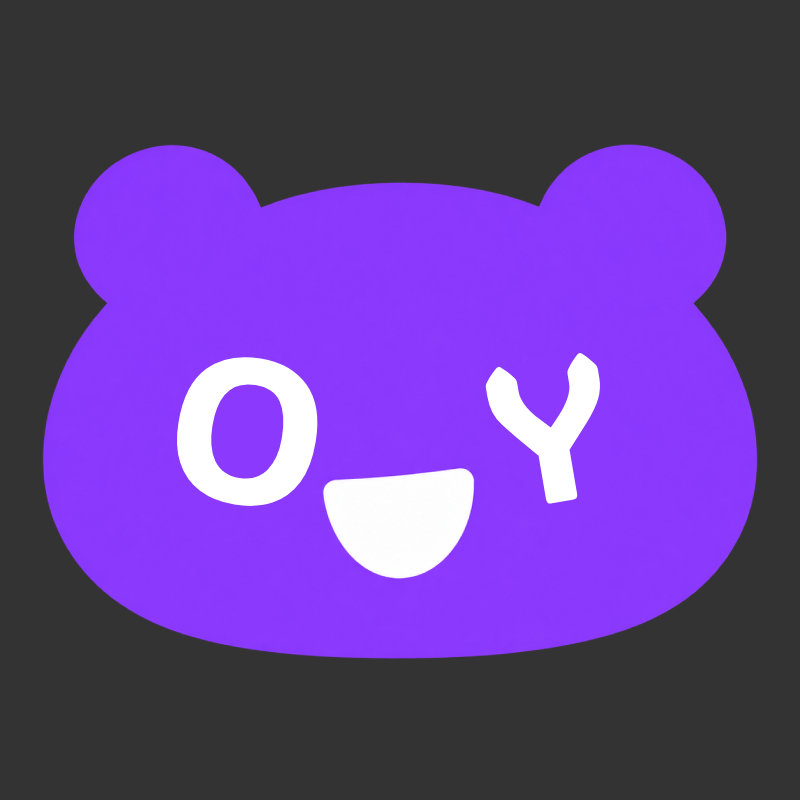
<style>
.page{position:relative;width:800px;height:800px;background:#333333}
.page>*{position:absolute;margin:0}
.t1{font:204.8px "ADLaMDisplay-Regular";color:#ffffff}
.t2{font:200.1px "ADLaMDisplay-Regular";color:#ffffff}
</style>
<div class="page">
<p class="t1" style="left:174px;top:353px;width:148px;height:156px;rotate:9deg">O</p>
<p class="t2" style="left:485px;top:352px;width:117px;height:152px;rotate:-10deg">Y</p>
</div>
